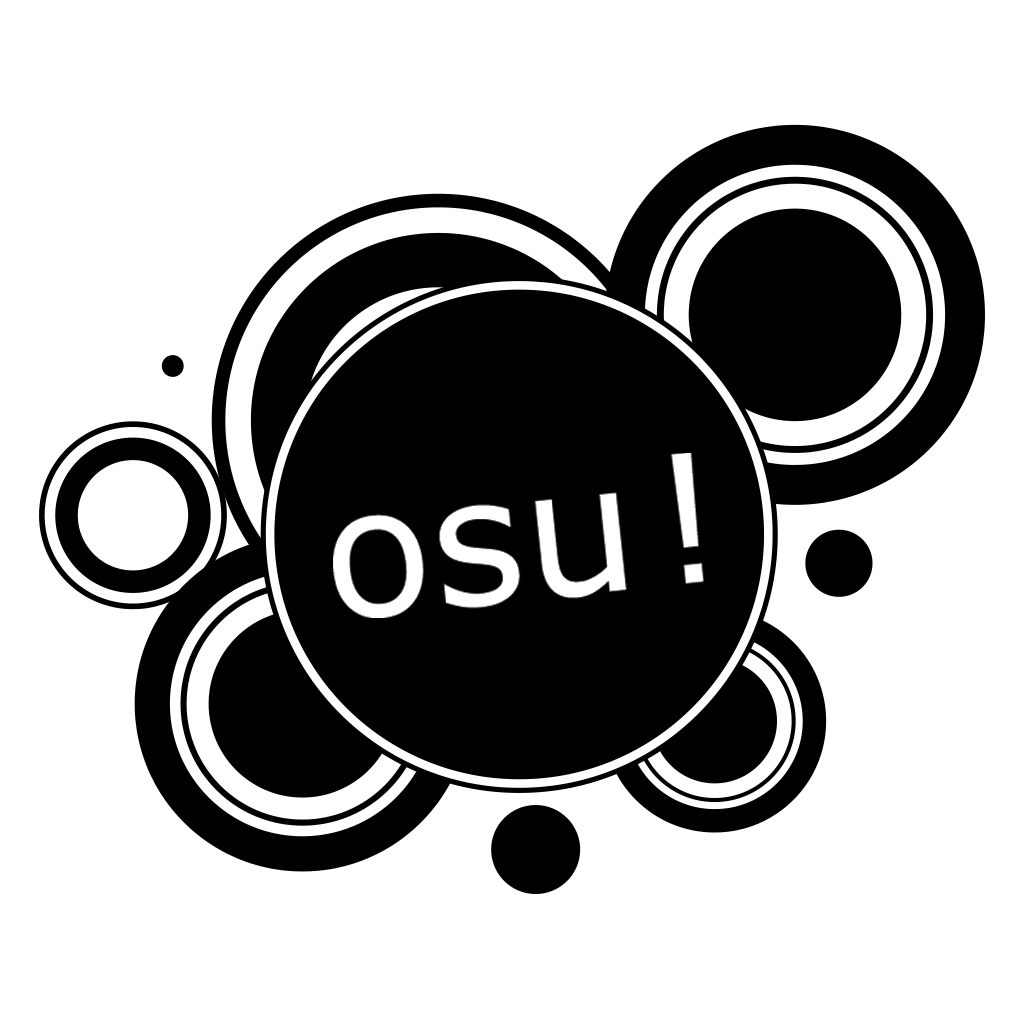
<style>
.page{position:relative;width:1021px;height:1021px;background:#ffffff}
.page>*{position:absolute;margin:0}
.t1{font:178.3px "Verdana";color:#ffffff}
.t2{font:178.3px "Verdana";letter-spacing:0.1em;color:#ffffff}
</style>
<div class="page">
<p class="t1" style="left:333px;top:453px;width:371px;height:165px;rotate:-6deg">os<span class="t2">u!</span></p>
</div>
